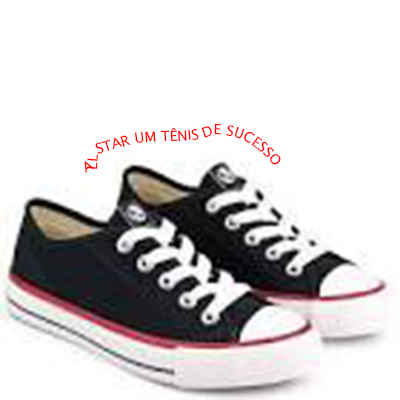
<style>
.page{position:relative;width:400px;height:400px;background:#ffffff}
.page>*{position:absolute;margin:0}
.t1{font:14px "LucidaSans";color:#ff0000}
</style>
<div class="page">
<p class="t1" style="left:84px;top:123px;width:197px;height:50px;text-align:center">ALLSTAR UM TÊNIS DE SUCESSO</p>
</div>
